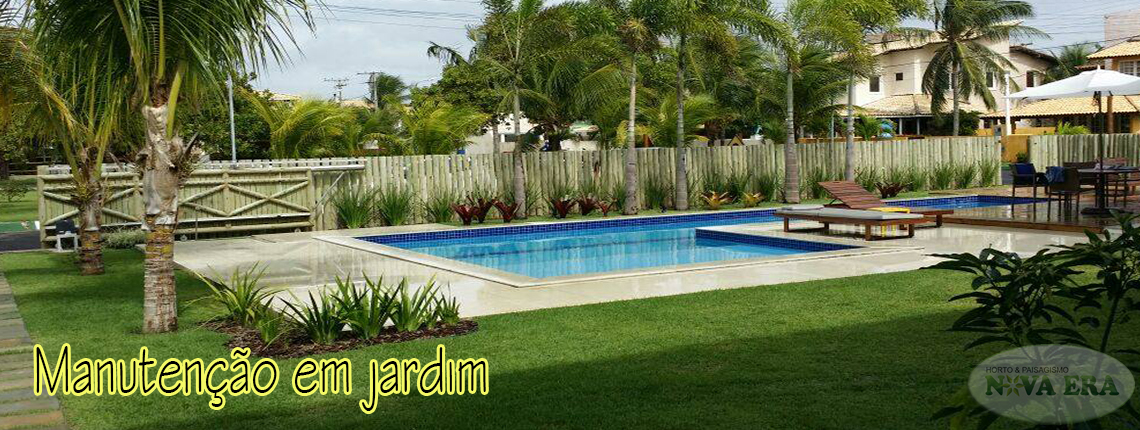
<style>
.page{position:relative;width:1140px;height:430px}
.page>*{position:absolute;margin:0}
.t1{font:69.8px "StylusBT";color:#000000;scale:0.67 1}
</style>
<div class="page">
<p class="t1" style="left:36px;top:346px;width:450px;height:65px">Manutenção em jardim</p>
</div>
